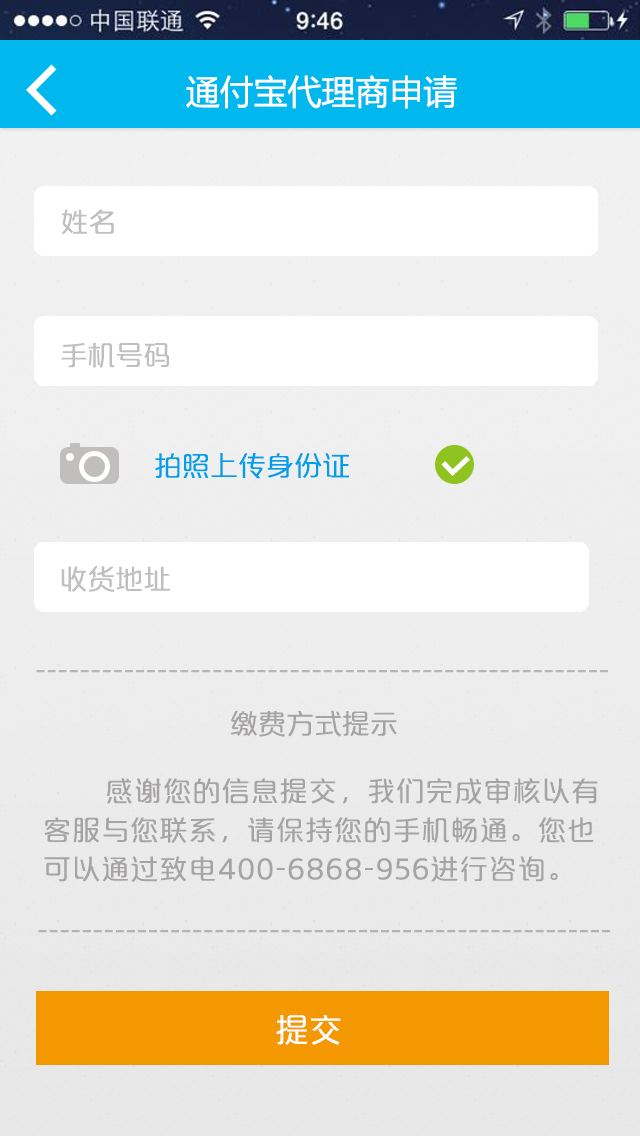
<style>
.page{position:relative;width:640px;height:1136px}
.page>*{position:absolute;margin:0}
.t1{font:34px "MicrosoftYaHei";color:#ffffff}
.t2{font:28px "FZPSHJW--GB1-0";color:#c1bebe}
.t3{font:28px "FZPSHJW--GB1-0";color:#00a0e9}
.t4{font:28px "FZPSHJW--GB1-0";color:#b6b6b6}
.t5{font:28px "FZPSHJW--GB1-0";color:#a5a3a3}
.t6{font:28px/39px "FZPSHJW--GB1-0";letter-spacing:0.04em;color:#a5a3a3}
.t7{font:28px/37px "FZPSHJW--GB1-0";color:#bbbaba}
.t8{font:33.3px "FZPSHJW--GB1-0";color:#ffffff}
</style>
<div class="page">
<p class="t1" style="left:186px;top:75px;width:271px;height:34px">通付宝代理商申请</p>
<p class="t2" style="left:61px;top:209px;width:53px;height:26px">姓名</p>
<p class="t2" style="left:61px;top:342px;width:108px;height:26px">手机号码</p>
<p class="t3" style="left:155px;top:453px;width:194px;height:26px">拍照上传身份证</p>
<p class="t2" style="left:61px;top:566px;width:109px;height:26px">收货地址</p>
<p class="t4" style="left:36px;top:670px;width:572px;height:3px">----------------------------------------------------</p>
<p class="t5" style="left:231px;top:710px;width:166px;height:27px">缴费方式提示</p>
<p class="t6" style="left:44px;top:778px;width:554px;height:104px"><span class="t7">        </span>感谢您的信息提交，我们完成审核以有<br>客服与您联系，请保持您的手机畅通。您也<br>可以通过致电400-6868-956进行咨询。</p>
<p class="t8" style="left:276px;top:1015px;width:65px;height:30px">提交</p>
</div>
